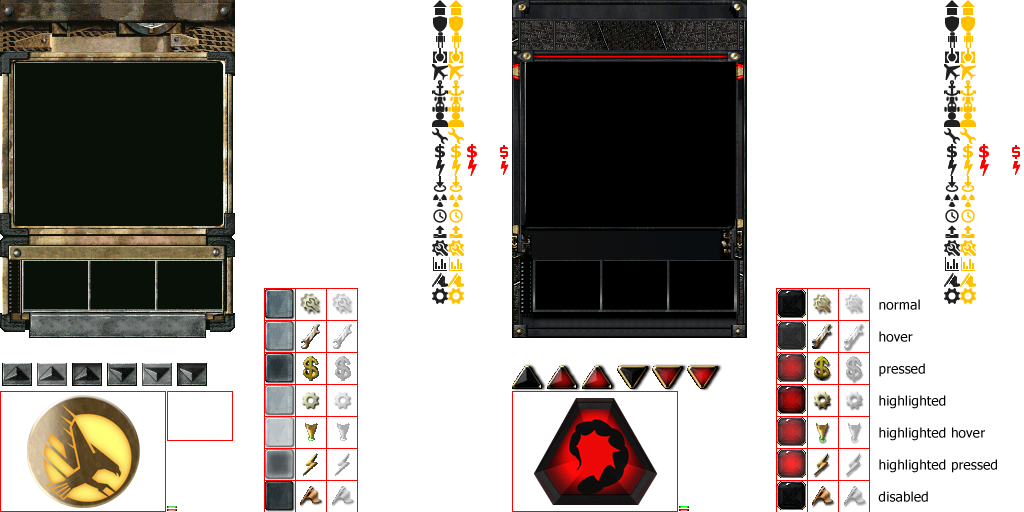
<style>
.page{position:relative;width:1024px;height:512px;background:#ffffff}
.page>*{position:absolute;margin:0}
.t1{font:13.3px "Tahoma";letter-spacing:0.02em;color:#000000}
</style>
<div class="page">
<p class="t1" style="left:878px;top:299px;width:119px;height:203px">normal<br><br>hover<br><br>pressed<br><br>highlighted<br><br>highlighted hover<br><br>highlighted pressed<br><br>disabled</p>
</div>
